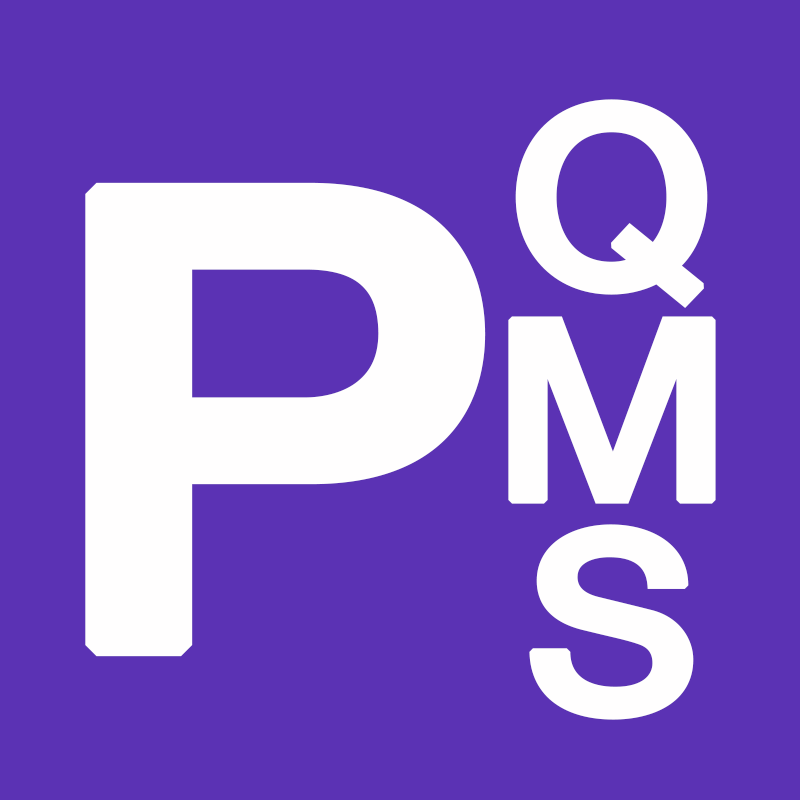
<style>
.page{position:relative;width:800px;height:800px;background:#5b32b4}
.page>*{position:absolute;margin:0}
.t1{font:251.6px/212.9px "HelveticaNeue-Medium";color:#fffefe;font-weight:bold;scale:1.07 1}
.t2{font:631.6px "HelveticaNeue-Medium";color:#fffefe;font-weight:bold;scale:1.07 1}
</style>
<div class="page">
<p class="t1" style="left:508px;top:99px;width:208px;height:621px;text-align:center">Q<br>M<br>S</p>
<p class="t2" style="left:85px;top:182px;width:401px;height:475px">P</p>
</div>
